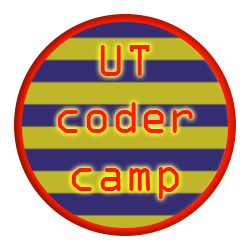
<style>
.page{position:relative;width:250px;height:250px;background:#ffffff}
.page>*{position:absolute;margin:0}
.t1{font:48px "OCRAExtended";color:#fb1d00}
</style>
<div class="page">
<p class="t1" style="left:57px;top:45px;width:136px;height:154px;text-align:center">UT coder camp</p>
</div>
